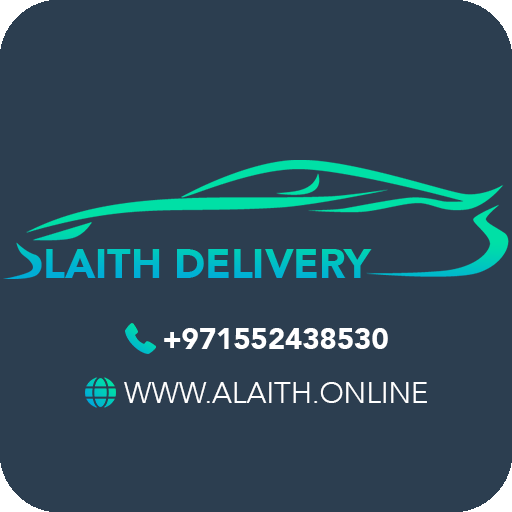
<style>
.page{position:relative;width:512px;height:512px;background:#2c3e50}
.page>*{position:absolute;margin:0}
.t1{font:29.2px "Avenir-Black";color:#ffffff;text-transform:uppercase}
.t2{font:29.2px "Avenir-Light";color:#ffffff;text-transform:uppercase}
</style>
<div class="page">
<p class="t1" style="left:164px;top:328px;width:224px;height:21px">+971552438530</p>
<p class="t2" style="left:124px;top:382px;width:303px;height:21px">www.alaith.online</p>
</div>
